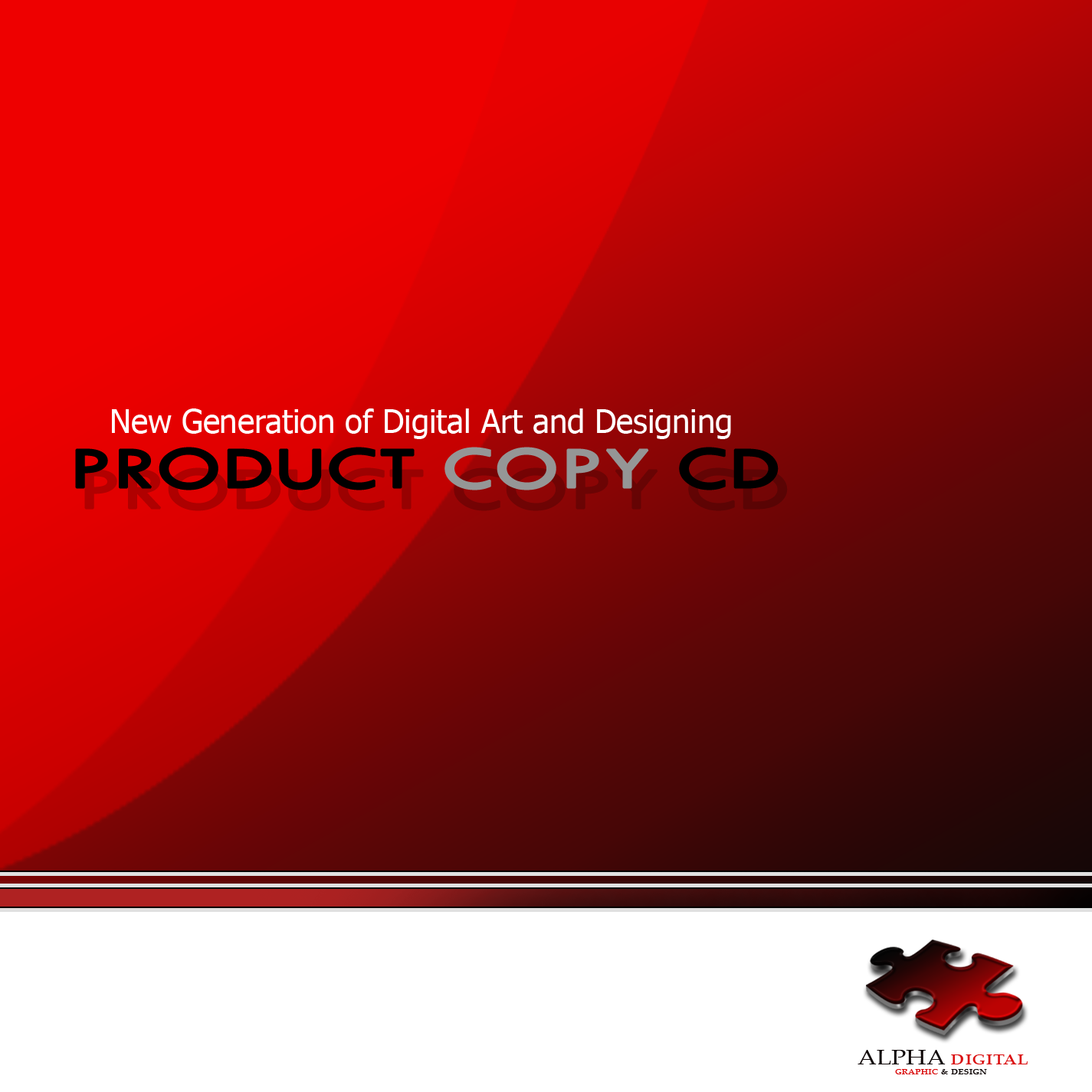
<style>
.page{position:relative;width:1092px;height:1092px}
.page>*{position:absolute;margin:0}
.t1{font:31.9px "Tahoma";color:#ffffff}
.t2{font:59.7px "TwCenMT-Regular";color:#000000;font-weight:bold;scale:1.39 1}
.t3{font:59.7px "TwCenMT-Regular";color:#959696;font-weight:bold;scale:1.39 1}
.t4{font:21.7px "PalatinoLinotype-Roman";color:#da0f10;font-variant:small-caps;scale:1.13 1}
.t5{font:21.7px "PalatinoLinotype-Roman";color:#0f0707;font-variant:small-caps;scale:1.13 1}
.t6{font:10.8px "PalatinoLinotype-Roman";color:#0f0707;font-variant:small-caps;scale:1.13 1}
.t7{font:10.8px "PalatinoLinotype-Roman";color:#da0f10;font-variant:small-caps;scale:1.13 1}
</style>
<div class="page">
<p class="t1" style="left:112px;top:408px;width:619px;height:31px">New Generation of Digital Art and Designing</p>
<p class="t2" style="left:75px;top:447px;width:704px;height:43px">PRODUCT<span class="t3"> COPY </span>CD</p>
<p class="t4" style="left:857px;top:1050px;width:171px;height:14px"><span class="t5">ALPHA </span>digital</p>
<p class="t6" style="left:895px;top:1069px;width:92px;height:5px"><span class="t7">graphic </span>&amp; design</p>
</div>
